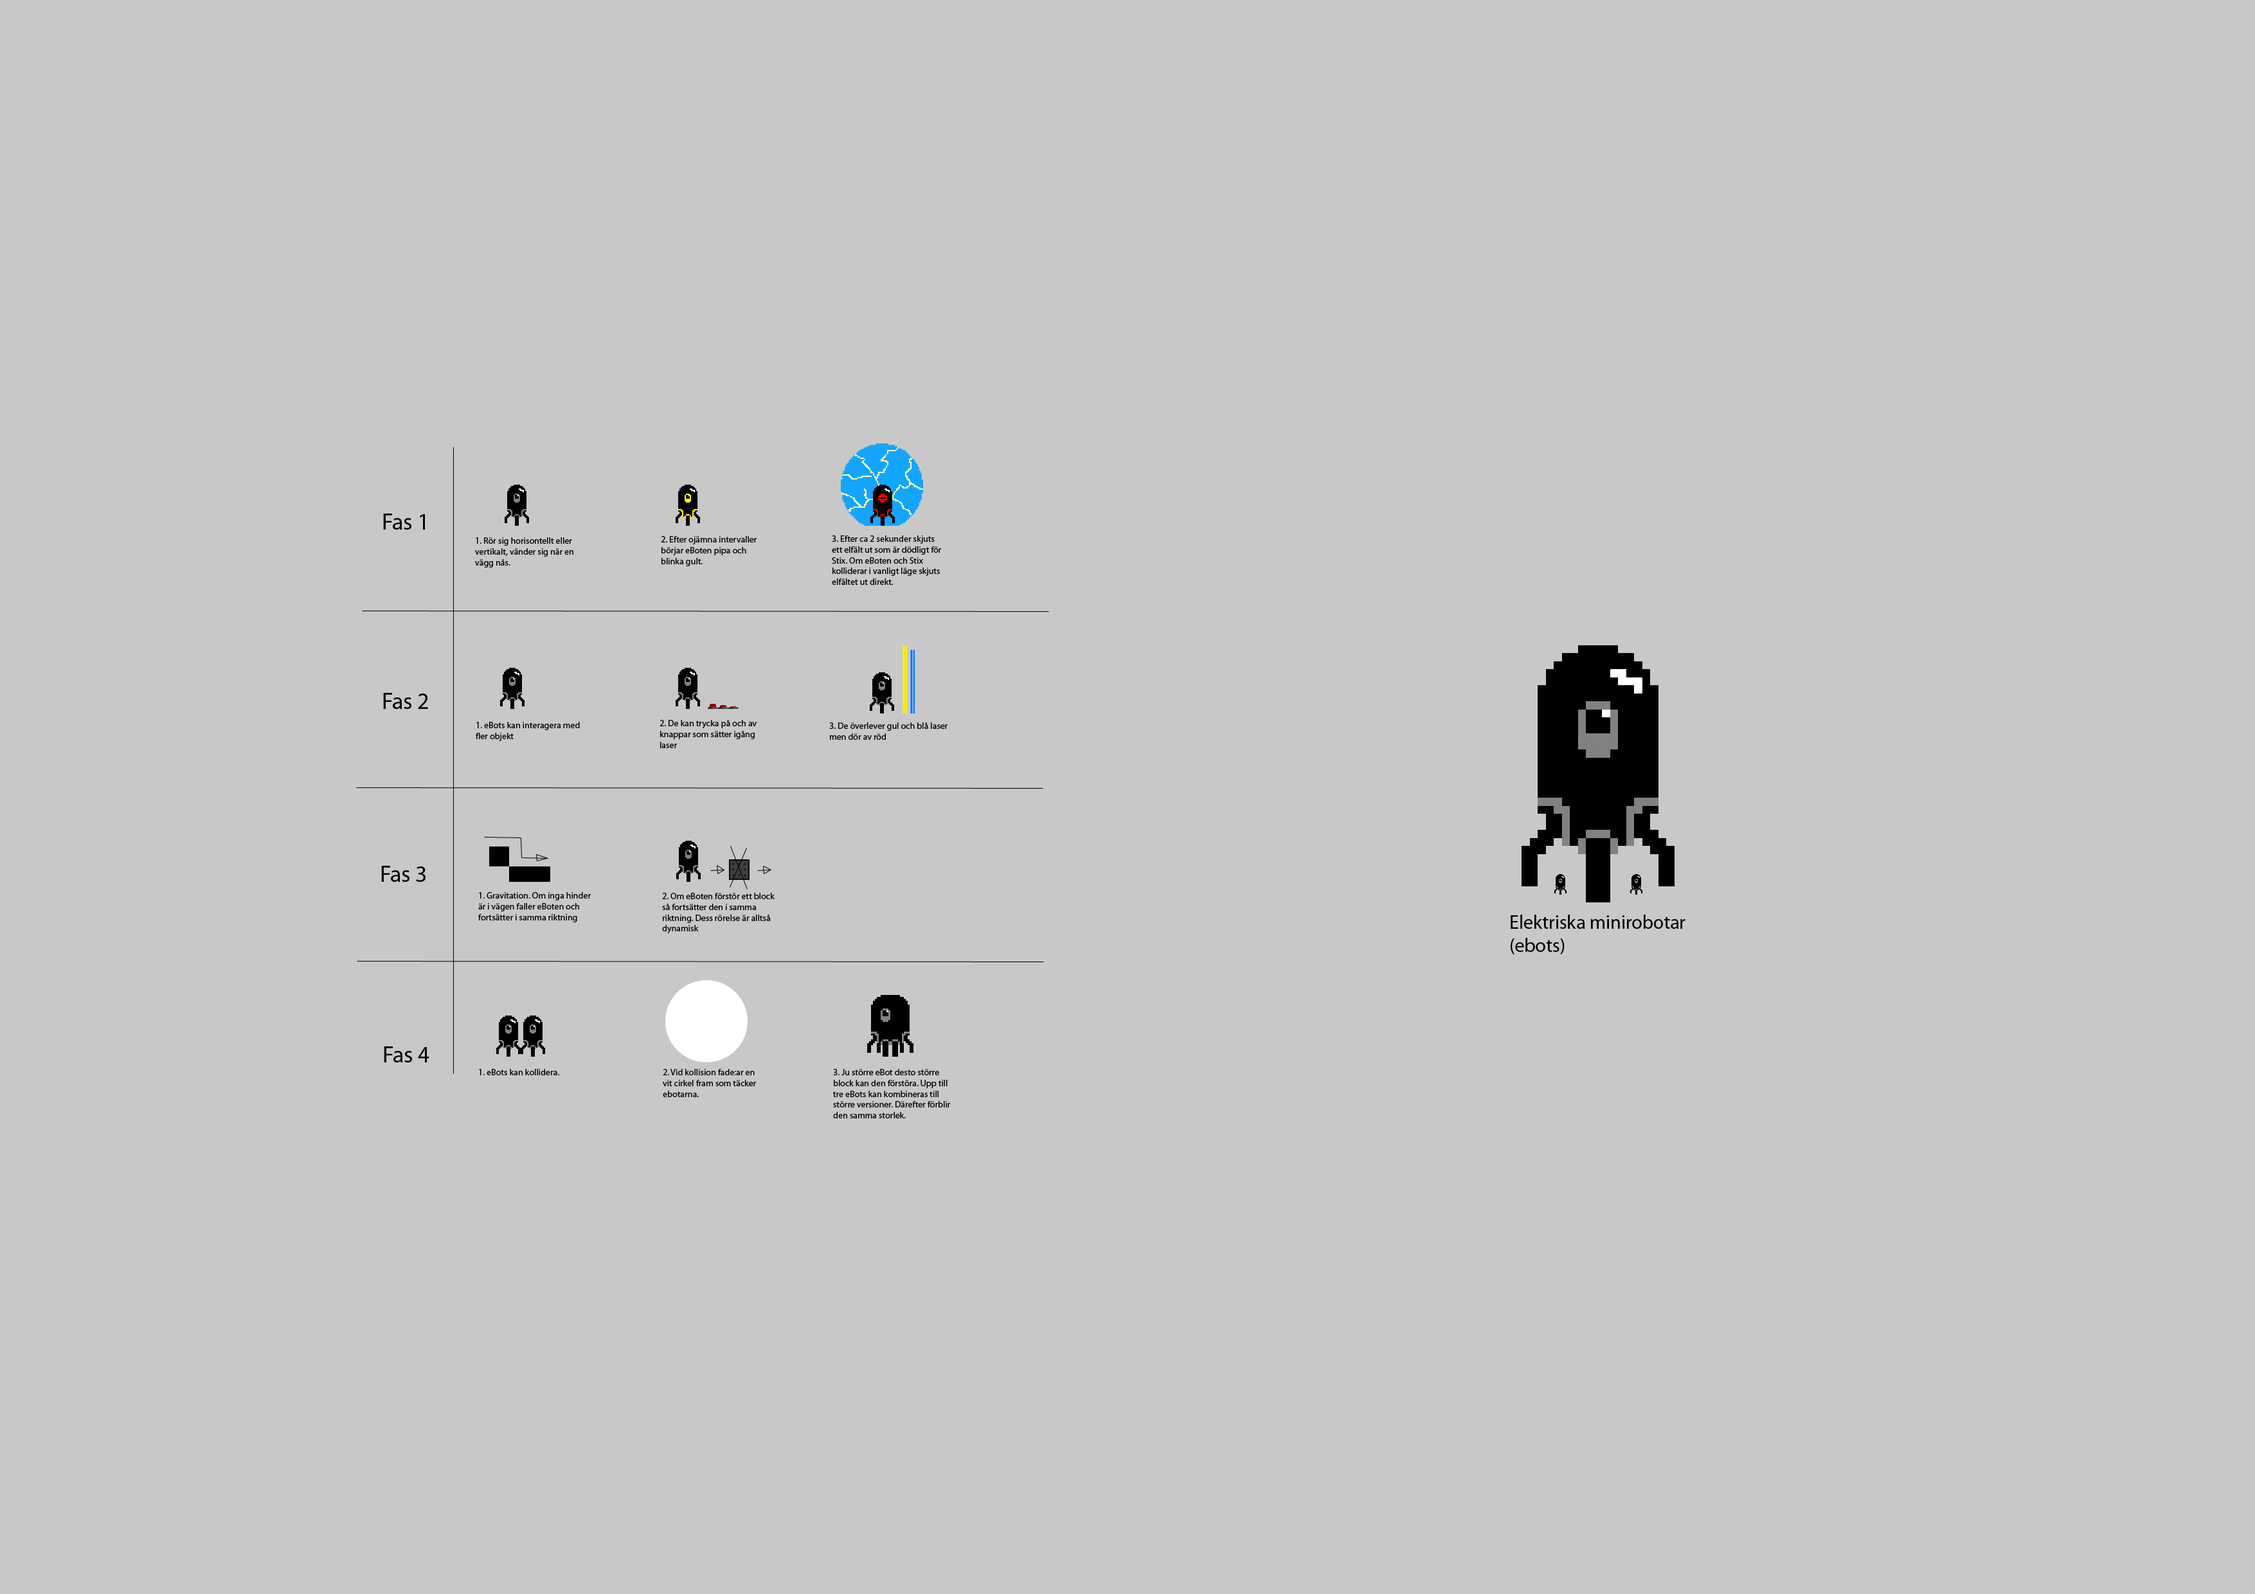
<style>
.page{position:relative;width:2255px;height:1594px;background:#c8c8c8}
.page>*{position:absolute;margin:0}
.t1{font:23.1px "MyriadPro-Regular";color:#000000}
.t2{font:9px "MyriadPro-Regular";color:#000000}
.t3{font:19.3px "MyriadPro-Regular";color:#000000}
</style>
<div class="page">
<p class="t1" style="left:383px;top:514px;width:42px;height:16px">Fas 1</p>
<p class="t2" style="left:475px;top:537px;width:98px;height:31px">1. Rör sig horisontellt eller<br>vertikalt, vänder sig när en <br>vägg nås.</p>
<p class="t2" style="left:661px;top:536px;width:96px;height:30px">2. Efter ojämna intervaller <br>börjar eBoten pipa och <br>blinka gult.</p>
<p class="t2" style="left:832px;top:536px;width:110px;height:49px">3. Efter ca 2 sekunder skjuts<br>ett elfält ut som är dödligt för<br>Stix. Om eBoten och Stix<br>kolliderar i vanligt läge skjuts<br>elfältet ut direkt.</p>
<p class="t1" style="left:383px;top:693px;width:45px;height:16px">Fas 2</p>
<p class="t2" style="left:476px;top:722px;width:104px;height:19px">1. eBots kan interagera med <br>fler objekt</p>
<p class="t2" style="left:660px;top:720px;width:97px;height:28px">2. De kan trycka på och av<br>knappar som sätter igång<br>laser</p>
<p class="t2" style="left:829px;top:723px;width:119px;height:17px">3. De överlever gul och blå laser<br>men dör av röd</p>
<p class="t1" style="left:381px;top:866px;width:45px;height:16px">Fas 3</p>
<p class="t2" style="left:478px;top:892px;width:113px;height:31px">1. Gravitation. Om inga hinder <br>är i vägen faller eBoten och <br>fortsätter i samma riktning</p>
<p class="t2" style="left:662px;top:893px;width:113px;height:40px">2. Om eBoten förstör ett block<br>så fortsätter den i samma <br>riktning. Dess rörelse är alltså<br>dynamisk</p>
<p class="t3" style="left:1511px;top:915px;width:175px;height:40px">Elektriska minirobotar<br>(ebots)</p>
<p class="t1" style="left:384px;top:1047px;width:45px;height:16px">Fas 4</p>
<p class="t2" style="left:479px;top:1069px;width:80px;height:7px">1. eBots kan kollidera.</p>
<p class="t2" style="left:663px;top:1069px;width:94px;height:28px">2. Vid kollision fade:ar en<br>vit cirkel fram som täcker<br>ebotarna.</p>
<p class="t2" style="left:833px;top:1069px;width:118px;height:50px">3. Ju större eBot desto större<br>block kan den förstöra. Upp till<br>tre eBots kan kombineras till<br>större versioner. Därefter förblir<br>den samma storlek.</p>
</div>
